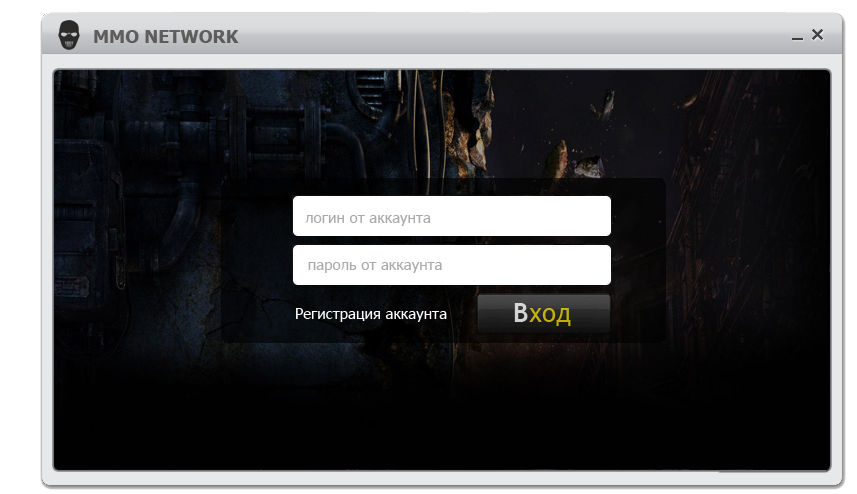
<style>
.page{position:relative;width:857px;height:494px}
.page>*{position:absolute;margin:0}
.t1{font:15px "Tahoma";color:#a9a9a9}
.t2{font:26px "TrebuchetMS"}
.t3{font:26px "TrebuchetMS-Bold"}
.t4{font:15px "Tahoma";color:#ffffff}
</style>
<div class="page">
<p class="t1" style="left:305px;top:215px;width:126px;height:11px">логин от аккаунта</p>
<p class="t1" style="left:308px;top:262px;width:134px;height:11px">пароль от аккаунта</p>
<p class="t2" style="left:514px;top:303px;width:57px;height:23px"><span class="t3">В</span>ход</p>
<p class="t4" style="left:296px;top:308px;width:151px;height:14px">Регистрация аккаунта</p>
</div>
